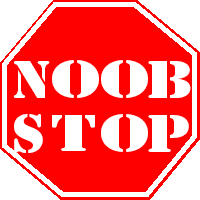
<style>
.page{position:relative;width:200px;height:200px;background:#ff0000}
.page>*{position:absolute;margin:0}
.t1{font:49.6px "StencilStd";color:#ffffff;scale:1.04 1}
.t2{font:47.9px "StencilStd";color:#ffffff;scale:1.44 1}
.t3{font:49.6px "StencilStd";color:#ffffff;scale:1.23 1}
</style>
<div class="page">
<p class="t1" style="left:13px;top:61px;width:37px;height:37px">N</p>
<p class="t2" style="left:52px;top:60px;width:47px;height:38px">O</p>
<p class="t2" style="left:101px;top:60px;width:47px;height:38px">O</p>
<p class="t3" style="left:148px;top:61px;width:43px;height:37px">B</p>
<p class="t1" style="left:14px;top:114px;width:29px;height:39px">S</p>
<p class="t2" style="left:52px;top:115px;width:43px;height:36px">T</p>
<p class="t2" style="left:101px;top:114px;width:47px;height:38px">O</p>
<p class="t3" style="left:148px;top:115px;width:41px;height:37px">p</p>
</div>
